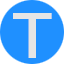
<style>
.page{position:relative;width:64px;height:64px;background:#1f90ff}
.page>*{position:absolute;margin:0}
.t1{font:60px "Verdana";color:#e5e5e5;font-weight:bold}
</style>
<div class="page">
<p class="t1" style="left:13px;top:13px;width:39px;height:45px">T</p>
</div>
